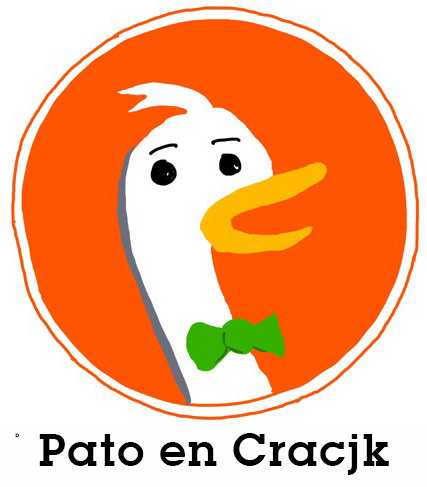
<style>
.page{position:relative;width:427px;height:487px;background:#ff5500}
.page>*{position:absolute;margin:0}
.t1{font:4.8px "SquareSerif-Bold";letter-spacing:0.025em;color:#000000}
.t2{font:48px "SquareSerif-Bold";letter-spacing:0.025em;color:#000000}
</style>
<div class="page">
<p class="t1" style="left:15px;top:433px;width:4px;height:5px">D</p>
<p class="t2" style="left:39px;top:433px;width:350px;height:42px">Pato en Cracjk</p>
</div>
